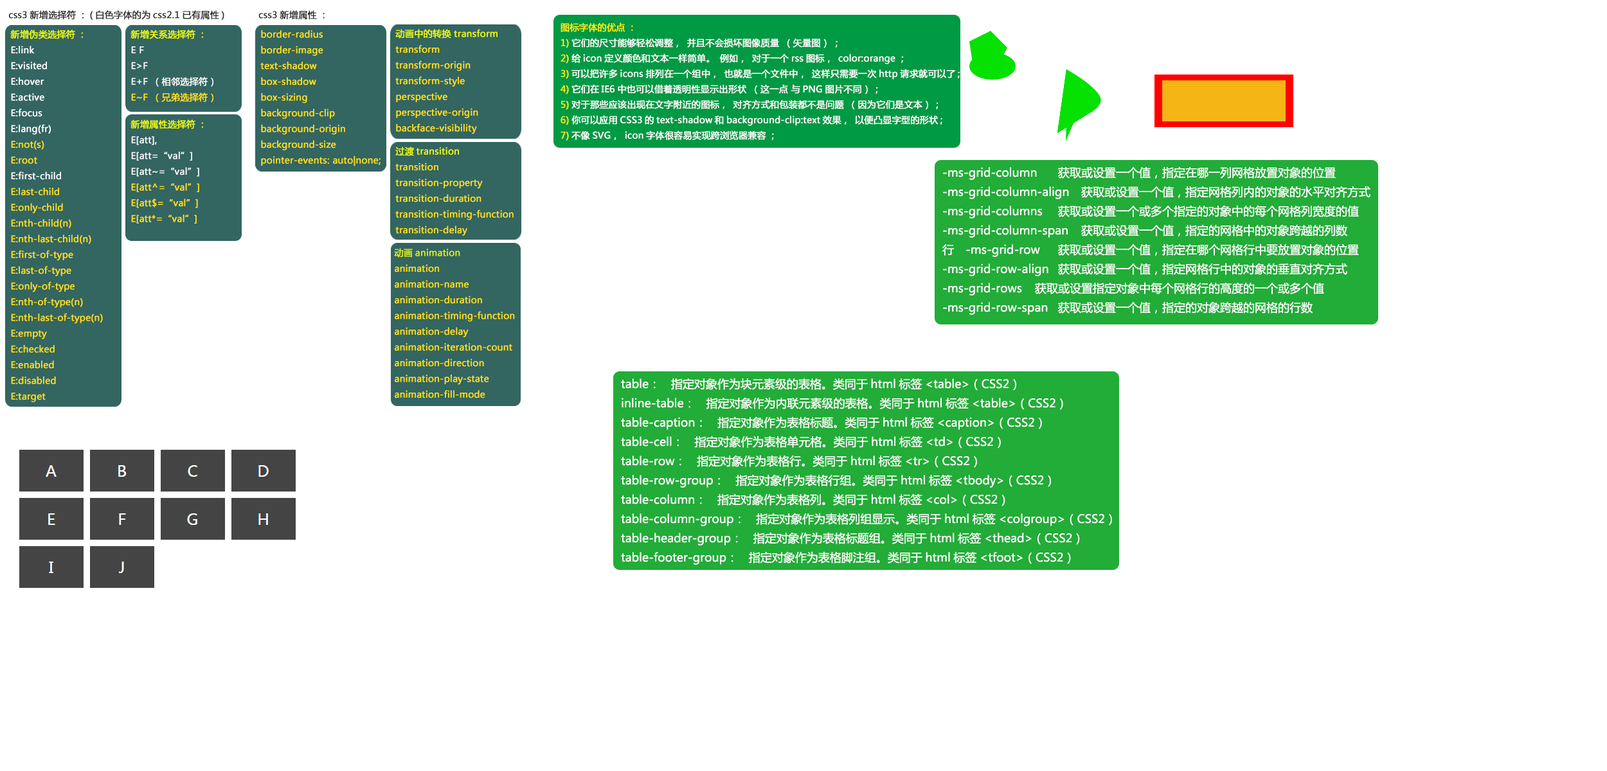
<style>
.page{position:relative;width:1607px;height:771px;background:#ffffff}
.page>*{position:absolute;margin:0}
.t1{font:9px "MicrosoftYaHei";color:#2a2a2a;font-weight:bold}
.t2{font:9px "MicrosoftYaHei";color:#ffe114;font-weight:bold}
.t3{font:9px "MicrosoftYaHei";color:#f0ff01;font-weight:bold}
.t4{font:9px "MicrosoftYaHei";color:#ffffff;font-weight:bold}
.t5{font:9px "MicrosoftYaHei";color:#f8f8f8;font-weight:bold}
.t6{font:9px/15.4px "MicrosoftYaHei";color:#ffffff;font-weight:bold}
.t7{font:9px/15.4px "MicrosoftYaHei";color:#fff10a;font-weight:bold}
.t8{font:11.6px/19.3px "MicrosoftYaHei";color:#ffffff}
.t9{font:9px "MicrosoftYaHei";color:#deef13;font-weight:bold}
</style>
<div class="page">
<p class="t1" style="left:8px;top:10px;width:216px;height:10px">css3新增选择符：(白色字体的为css2.1已有属性)</p>
<p class="t1" style="left:258px;top:10px;width:67px;height:10px">css3新增属性：</p>
<p class="t2" style="left:10px;top:30px;width:93px;height:372px"><span class="t3">新增伪类选择符：<br></span><span class="t4">E:link<br>E:visited<br>E:hover<br>E:active<br>E:focus<br>E:lang(fr)<br></span>E:not(s)<br>E:root<br><span class="t4">E:first-child<br></span>E:last-child<br>E:only-child<br>E:nth-child(n)<br>E:nth-last-child(n)<br>E:first-of-type<br>E:last-of-type<br>E:only-of-type<br>E:nth-of-type(n)<br>E:nth-last-of-type(n)<br>E:empty<br>E:checked<br>E:enabled<br>E:disabled<br>E:target</p>
<p class="t5" style="left:130px;top:30px;width:83px;height:72px"><span class="t3">新增关系选择符：<br></span>E F<br>E&gt;F<br>E+F（相邻选择符）<br><span class="t2">E~F（兄弟选择符）</span></p>
<p class="t2" style="left:395px;top:29px;width:103px;height:105px"><span class="t3">动画中的转换 transform<br></span>transform<br>transform-origin<br>transform-style<br>perspective<br>perspective-origin<br>backface-visibility</p>
<p class="t6" style="left:561px;top:22px;width:399px;height:119px"><span class="t7">图标字体的优点：<br>1)</span>它们的尺寸能够轻松调整，并且不会损坏图像质量（矢量图）；<br><span class="t7">2)</span>给icon定义颜色和文本一样简单。例如，对于一个rss图标，color:orange；<br><span class="t7">3)</span>可以把许多icons排列在一个组中，也就是一个文件中，这样只需要一次http请求就可以了;<br><span class="t7">4)</span>它们在IE6中也可以借着透明性显示出形状（这一点 与PNG图片不同）;<br><span class="t7">5)</span>对于那些应该出现在文字附近的图标，对齐方式和包装都不是问题（因为它们是文本）;<br><span class="t7">6)</span>你可以应用CSS3的text-shadow和background-clip:text效果，以便凸显字型的形状;<br><span class="t7">7)</span>不像SVG，icon字体很容易实现跨浏览器兼容；</p>
<p class="t2" style="left:260px;top:30px;width:121px;height:136px">border-radius<br>border-image<br>text-shadow<br>box-shadow<br>box-sizing<br>background-clip<br>background-origin<br>background-size<br>pointer-events: auto|none;</p>
<p class="t2" style="left:130px;top:120px;width:73px;height:104px"><span class="t3">新增属性选择符：<br></span><span class="t5">E[att], <br>E[att=“val”] <br>E[att~=“val”] <br></span>E[att^=“val”]<br>E[att$=“val”] <br>E[att*=“val”]</p>
<p class="t2" style="left:395px;top:147px;width:119px;height:89px"><span class="t3">过渡transition<br></span>transition<br>transition-property<br>transition-duration<br>transition-timing-function<br>transition-delay</p>
<p class="t8" style="left:942px;top:166px;width:429px;height:149px">-ms-grid-column 获取或设置一个值，指定在哪一列网格放置对象的位置<br>-ms-grid-column-align 获取或设置一个值，指定网格列内的对象的水平对齐方式<br>-ms-grid-columns 获取或设置一个或多个指定的对象中的每个网格列宽度的值<br>-ms-grid-column-span 获取或设置一个值，指定的网格中的对象跨越的列数<br>行 -ms-grid-row 获取或设置一个值，指定在哪个网格行中要放置对象的位置<br>-ms-grid-row-align 获取或设置一个值，指定网格行中的对象的垂直对齐方式<br>-ms-grid-rows 获取或设置指定对象中每个网格行的高度的一个或多个值<br>-ms-grid-row-span 获取或设置一个值，指定的对象跨越的网格的行数</p>
<p class="t2" style="left:394px;top:248px;width:121px;height:151px"><span class="t9">动画animation<br></span>animation<br>animation-name<br>animation-duration<br>animation-timing-function<br>animation-delay<br>animation-iteration-count<br>animation-direction<br>animation-play-state<br>animation-fill-mode</p>
<p class="t8" style="left:621px;top:378px;width:491px;height:187px">table：    指定对象作为块元素级的表格。类同于html标签&lt;table&gt;（CSS2）<br>inline-table：    指定对象作为内联元素级的表格。类同于html标签&lt;table&gt;（CSS2）<br>table-caption：    指定对象作为表格标题。类同于html标签&lt;caption&gt;（CSS2）<br>table-cell：    指定对象作为表格单元格。类同于html标签&lt;td&gt;（CSS2）<br>table-row：    指定对象作为表格行。类同于html标签&lt;tr&gt;（CSS2）<br>table-row-group：    指定对象作为表格行组。类同于html标签&lt;tbody&gt;（CSS2）<br>table-column：    指定对象作为表格列。类同于html标签&lt;col&gt;（CSS2）<br>table-column-group：    指定对象作为表格列组显示。类同于html标签&lt;colgroup&gt;（CSS2）<br>table-header-group：    指定对象作为表格标题组。类同于html标签&lt;thead&gt;（CSS2）<br>table-footer-group：    指定对象作为表格脚注组。类同于html标签&lt;tfoot&gt;（CSS2）</p>
</div>
